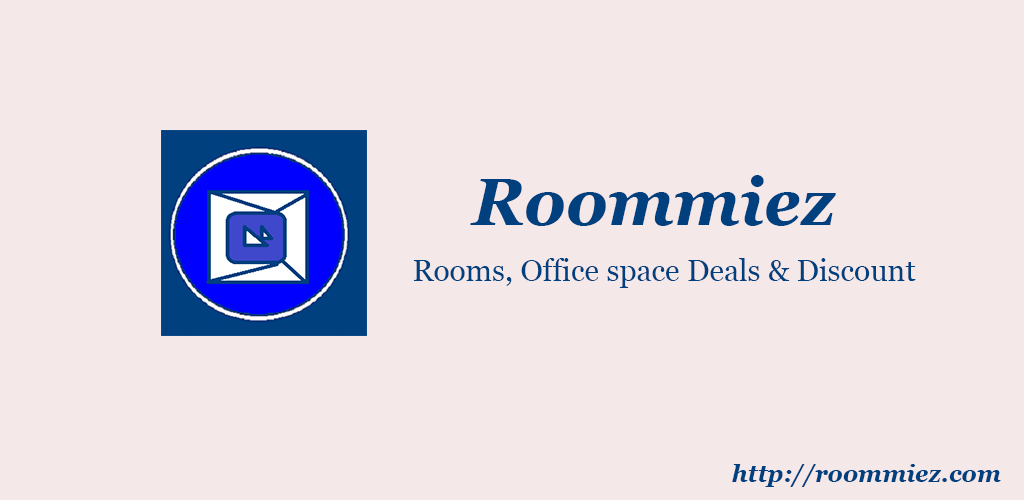
<style>
.page{position:relative;width:1024px;height:500px;background:#f5e8e8}
.page>*{position:absolute;margin:0}
.t1{font:66px "Georgia-BoldItalic";color:#004080}
.t2{font:30px "Georgia";color:#004080}
.t3{font:24px "Georgia-BoldItalic";color:#004080}
</style>
<div class="page">
<p class="t1" style="left:470px;top:175px;width:366px;height:51px">Roommiez</p>
<p class="t2" style="left:413px;top:258px;width:503px;height:30px">Rooms, Office space Deals &amp; Discount</p>
<p class="t3" style="left:732px;top:464px;width:269px;height:23px">http://roommiez.com</p>
</div>
